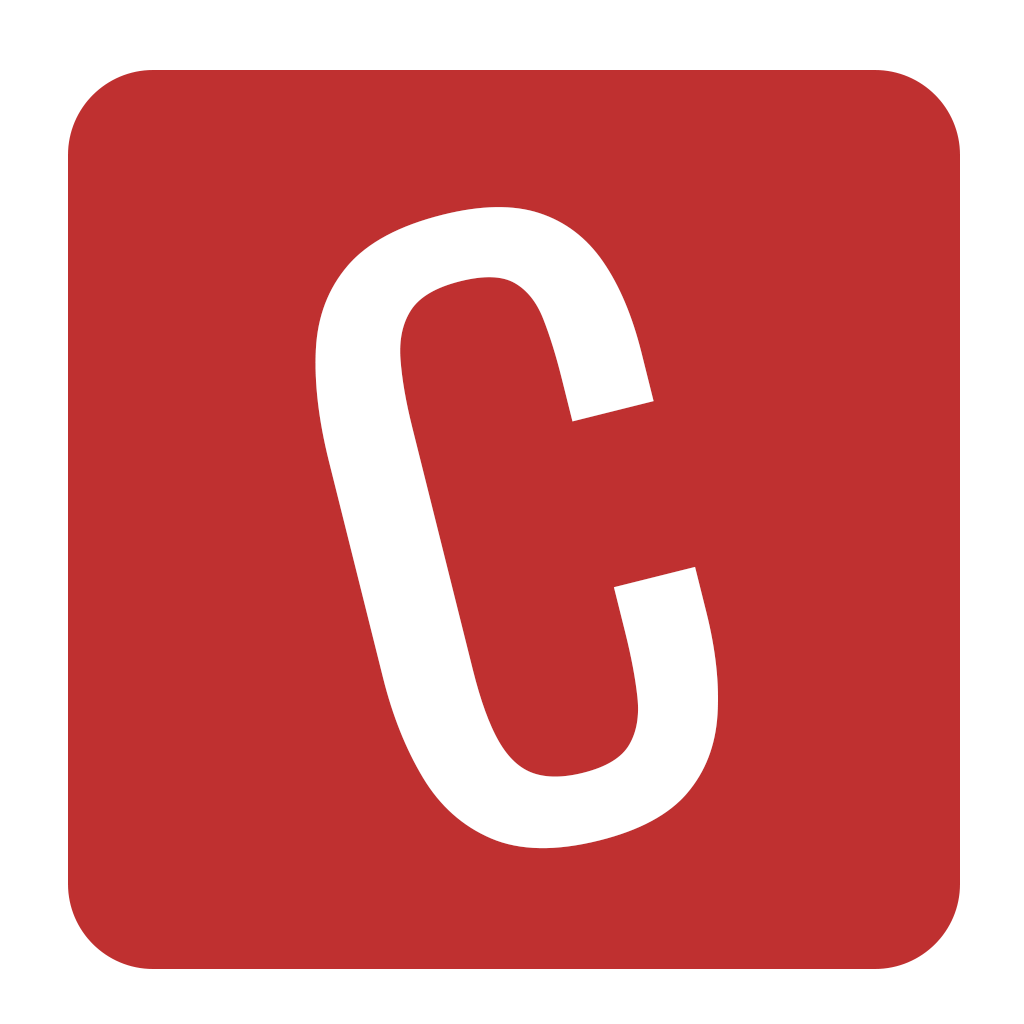
<style>
.page{position:relative;width:1024px;height:1024px;background:#bf3030}
.page>*{position:absolute;margin:0}
.t1{font:780.8px "Oswald-Regular";color:#ffffff;text-transform:uppercase}
</style>
<div class="page">
<p class="t1" style="left:315px;top:207px;width:403px;height:642px;rotate:-14deg">C</p>
</div>
